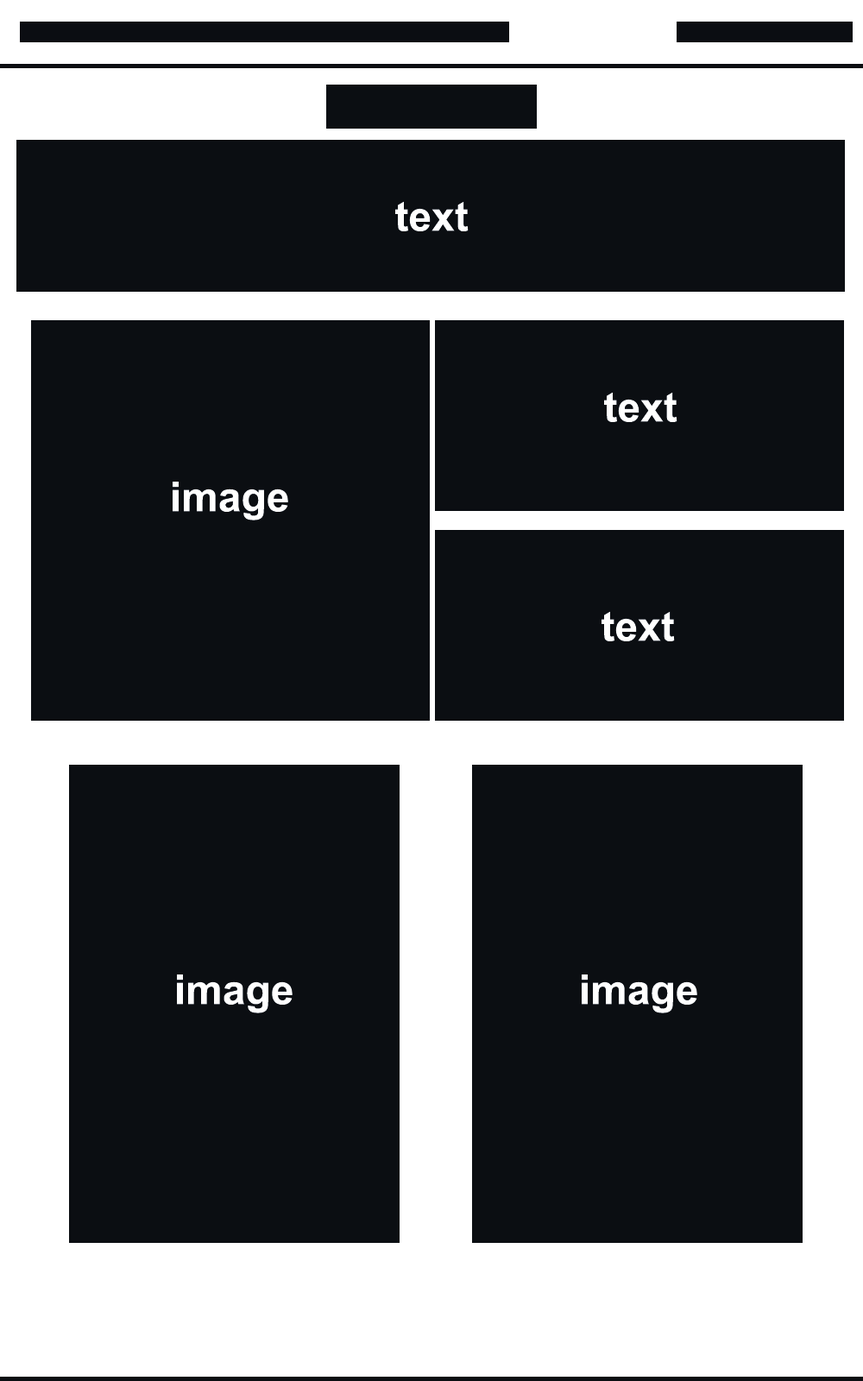
<style>
.page{position:relative;width:863px;height:1381px;background:#0b0e12}
.page>*{position:absolute;margin:0}
.t1{font:41.4px "Arial-BoldMT";color:#ffffff}
</style>
<div class="page">
<p class="t1" style="left:395px;top:201px;width:74px;height:30px">text</p>
<p class="t1" style="left:604px;top:392px;width:74px;height:30px">text</p>
<p class="t1" style="left:173px;top:482px;width:115px;height:39px">image</p>
<p class="t1" style="left:602px;top:611px;width:73px;height:30px">text</p>
<p class="t1" style="left:177px;top:975px;width:116px;height:39px">image</p>
<p class="t1" style="left:582px;top:975px;width:116px;height:39px">image</p>
</div>
